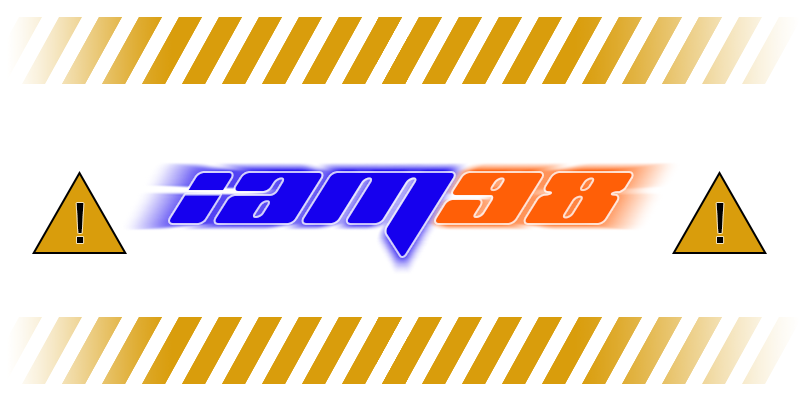
<style>
.page{position:relative;width:800px;height:400px;background:#ffffff}
.page>*{position:absolute;margin:0}
.t1{font:94.9px "PlanetKosmos";letter-spacing:0.05em;color:#1600ee;scale:1.08 1}
.t2{font:94.9px "PlanetKosmos";letter-spacing:0.05em;color:#ff5f07;scale:1.08 1}
.t3{font:60px "FranklinGothic-Book";letter-spacing:0.05em;color:#000000}
</style>
<div class="page">
<p class="t1" style="left:170px;top:173px;width:284px;height:83px">iam</p>
<p class="t2" style="left:436px;top:173px;width:196px;height:50px">98</p>
<p class="t3" style="left:76px;top:203px;width:8px;height:40px">!</p>
<p class="t3" style="left:716px;top:203px;width:8px;height:40px">!</p>
</div>
